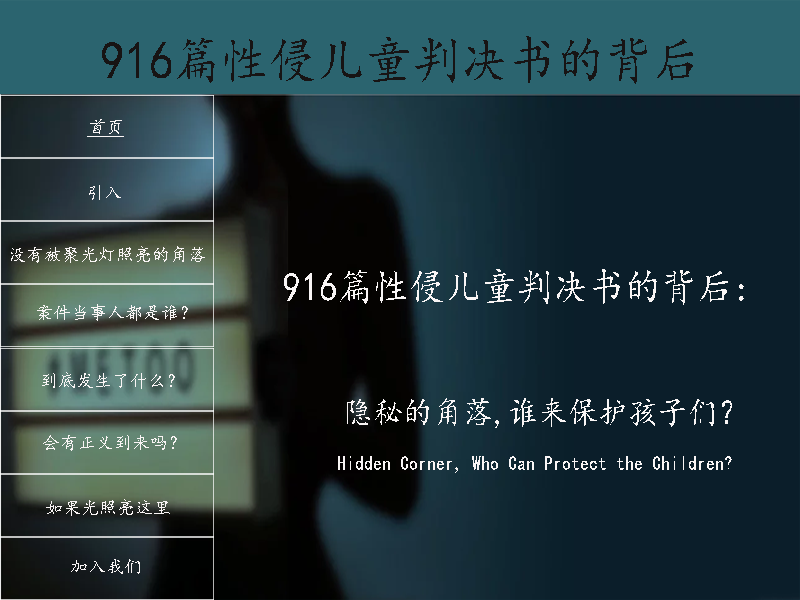
<style>
.page{position:relative;width:800px;height:600px;background:#0b1e2a}
.page>*{position:absolute;margin:0}
.t1{font:53.3px "¿¬Ìå";color:#171414;scale:0.9 1}
.t2{font:18px "¿¬Ìå";color:#f9f5f5;font-style:italic;text-decoration:underline}
.t3{font:18px "¿¬Ìå";color:#f9f5f5}
.t4{font:20px "¿¬Ìå";color:#f9f5f5;scale:0.9 1}
.t5{font:40px "¿¬Ìå";color:#f9f5f5;scale:0.9 1}
.t6{font:33.3px "¿¬Ìå";color:#f9f5f5;scale:0.9 1}
</style>
<div class="page">
<p class="t1" style="left:102px;top:36px;width:591px;height:48px">916篇性侵儿童判决书的背后</p>
<p class="t2" style="left:87px;top:119px;width:37px;height:18px">首页</p>
<p class="t3" style="left:89px;top:185px;width:32px;height:15px">引入</p>
<p class="t3" style="left:11px;top:246px;width:194px;height:17px">没有被聚光灯照亮的角落</p>
<p class="t4" style="left:284px;top:269px;width:460px;height:204px"><span class="t5">916篇性侵儿童判决书的背后:<br></span><span class="t6">​​    <br>    隐秘的角落,谁来保护孩子们？<br></span>      Hidden Corner, Who Can Protect the Children?</p>
<p class="t3" style="left:37px;top:304px;width:151px;height:17px">案件当事人都是谁？</p>
<p class="t3" style="left:42px;top:372px;width:133px;height:17px">到底发生了什么？</p>
<p class="t3" style="left:43px;top:435px;width:134px;height:16px">会有正义到来吗？</p>
<p class="t3" style="left:46px;top:499px;width:124px;height:17px">如果光照亮这里</p>
<p class="t3" style="left:71px;top:559px;width:69px;height:15px">加入我们</p>
</div>
